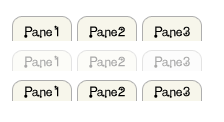
<style>
.page{position:relative;width:224px;height:122px;background:#ffffff}
.page>*{position:absolute;margin:0}
.t1{font:12px "Hppy";color:#000000}
.t2{font:12px "Hppy";color:#a8a8a8}
</style>
<div class="page">
<p class="t1" style="left:24px;top:25px;width:35px;height:13px">Pane1</p>
<p class="t1" style="left:89px;top:26px;width:36px;height:12px">Pane2</p>
<p class="t1" style="left:154px;top:26px;width:36px;height:12px">Pane3</p>
<p class="t2" style="left:24px;top:55px;width:35px;height:13px">Pane1</p>
<p class="t2" style="left:89px;top:56px;width:36px;height:12px">Pane2</p>
<p class="t2" style="left:154px;top:56px;width:36px;height:12px">Pane3</p>
<p class="t1" style="left:24px;top:85px;width:35px;height:13px">Pane1</p>
<p class="t1" style="left:89px;top:86px;width:36px;height:12px">Pane2</p>
<p class="t1" style="left:154px;top:86px;width:36px;height:12px">Pane3</p>
</div>
